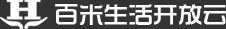
<style>
.page{position:relative;width:226px;height:29px;background:#333333}
.page>*{position:absolute;margin:0}
.t1{font:24px "TRENDS";color:#ffffff;font-weight:bold}
</style>
<div class="page">
<p class="t1" style="left:55px;top:4px;width:171px;height:21px">百米生活开放云</p>
</div>
